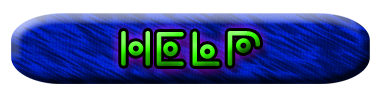
<style>
.page{position:relative;width:380px;height:97px;background:#ffffff}
.page>*{position:absolute;margin:0}
.t1{font:50px "wearealien!!"}
</style>
<div class="page">
<p class="t1" style="left:121px;top:31px;width:139px;height:35px">Help</p>
</div>
